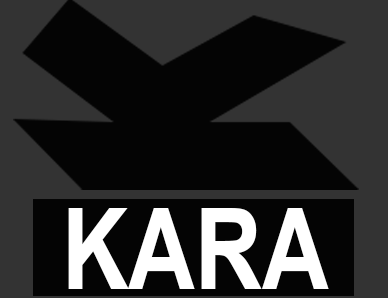
<style>
.page{position:relative;width:388px;height:298px;background:#040404}
.page>*{position:absolute;margin:0}
.t1{font:112.5px "ArialNarrow-Bold";color:#ffffff}
</style>
<div class="page">
<p class="t1" style="left:68px;top:208px;width:261px;height:81px">KARA</p>
</div>
